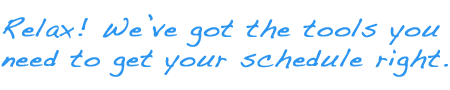
<style>
.page{position:relative;width:450px;height:90px;background:#ffffff}
.page>*{position:absolute;margin:0}
.t1{font:25px "Handwriting-Dakota";letter-spacing:0.04em;color:#2b96f1;font-weight:bold}
</style>
<div class="page">
<p class="t1" style="left:1px;top:14px;width:447px;height:63px">Relax! We’ve got the tools you<br>need to get your schedule right.</p>
</div>
